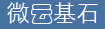
<style>
.page{position:relative;width:105px;height:29px}
.page>*{position:absolute;margin:0}
.t1{font:23.3px "STXihei";color:#ffffff}
.t2{font:23.3px "STCaiyun";color:#ffffff}
</style>
<div class="page">
<p class="t1" style="left:7px;top:2px;width:91px;height:22px">微<span class="t2">云</span>基石</p>
</div>
